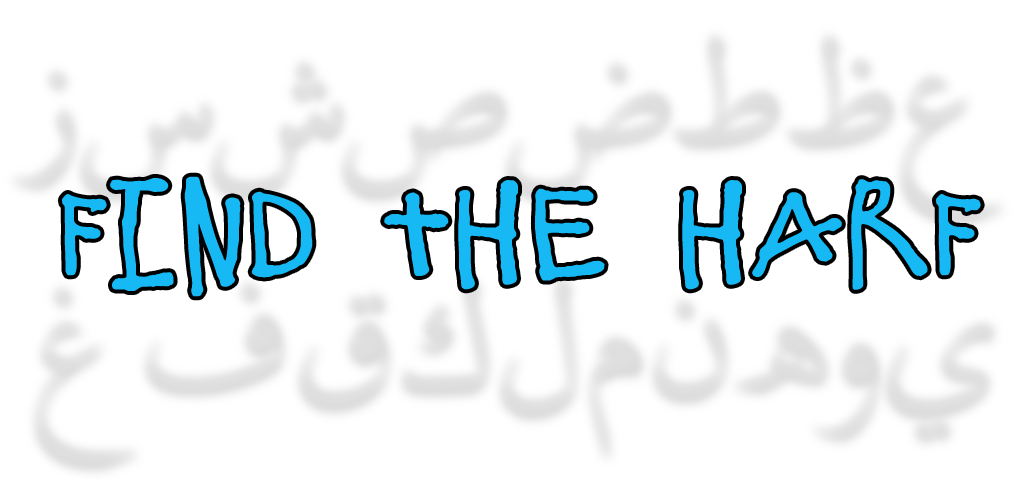
<style>
.page{position:relative;width:1024px;height:500px;background:#ffffff}
.page>*{position:absolute;margin:0}
.t1{font:125px "ElliotSix";color:#17b9f5}
</style>
<div class="page">
<p class="t1" style="left:62px;top:176px;width:919px;height:121px">Find the Harf</p>
</div>
